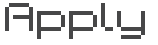
<style>
.page{position:relative;width:158px;height:45px;background:#ffffff}
.page>*{position:absolute;margin:0}
.t1{font:36px "BMspaceA9";color:#474748}
</style>
<div class="page">
<p class="t1" style="left:5px;top:3px;width:140px;height:36px">Apply</p>
</div>
